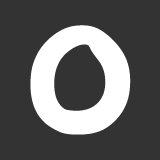
<style>
.page{position:relative;width:160px;height:160px;background:#333333}
.page>*{position:absolute;margin:0}
.t1{font:159.4px "QAReports";color:#ffffff}
</style>
<div class="page">
<p class="t1" style="left:30px;top:25px;width:101px;height:110px">O</p>
</div>
